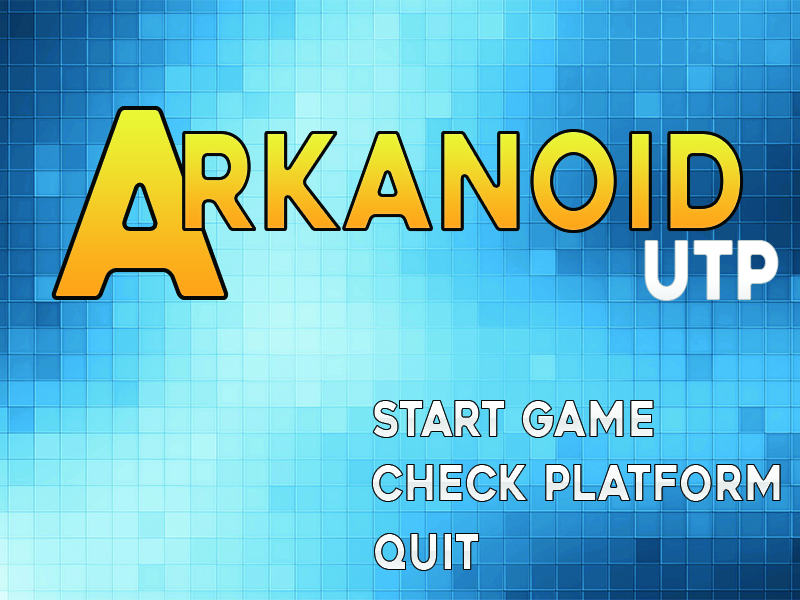
<style>
.page{position:relative;width:800px;height:600px}
.page>*{position:absolute;margin:0}
.t1{font:266.4px "Heavitas";scale:0.83 1}
.t2{font:136.8px "Heavitas";scale:0.83 1}
.t3{font:81.6px "Heavitas";color:#ffffff;scale:0.83 1}
.t4{font:50.4px "Heavitas";color:#ffffff;scale:0.83 1}
</style>
<div class="page">
<p class="t1" style="left:51px;top:106px;width:178px;height:194px">A</p>
<p class="t2" style="left:182px;top:129px;width:562px;height:104px">rkanoid</p>
<p class="t3" style="left:644px;top:240px;width:135px;height:61px">UTP</p>
<p class="t4" style="left:372px;top:400px;width:282px;height:38px">START GAME</p>
<p class="t4" style="left:371px;top:464px;width:410px;height:38px">CHECK PLATFORM</p>
<p class="t4" style="left:374px;top:533px;width:106px;height:38px">QUIT</p>
</div>
